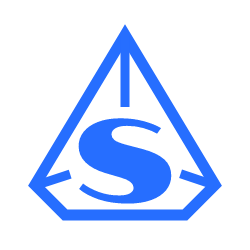
<style>
.page{position:relative;width:250px;height:250px;background:#ffffff}
.page>*{position:absolute;margin:0}
.t1{font:120px "Notable-Regular";color:#266eff}
</style>
<div class="page">
<p class="t1" style="left:78px;top:118px;width:94px;height:86px">S</p>
</div>
